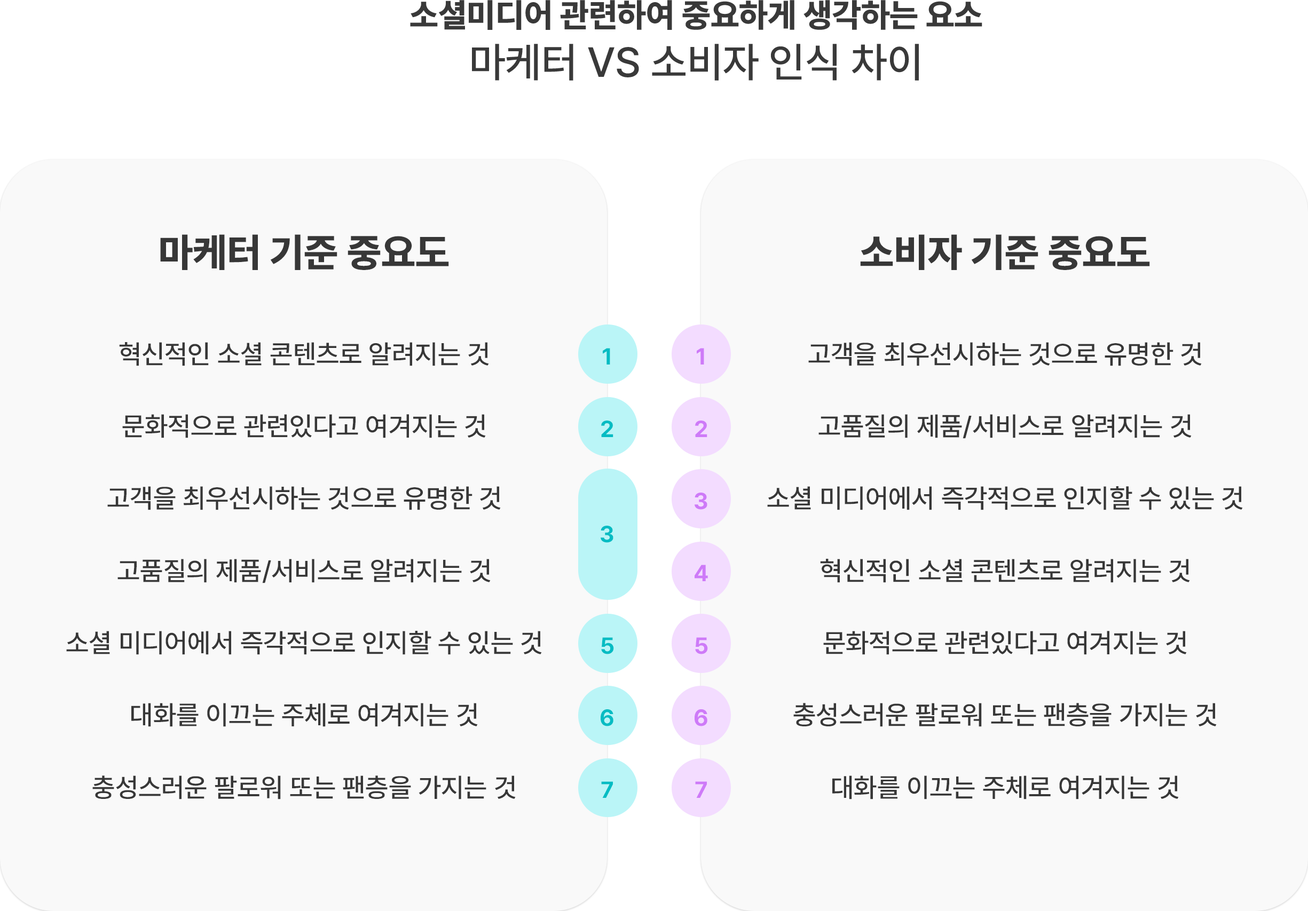
<style>
.page{position:relative;width:1308px;height:911px;background:#f9f9f9}
.page>*{position:absolute;margin:0}
.t1{font:33.1px "Pretendard-ExtraBold";color:#393939;text-transform:uppercase}
.t2{font:41.6px "Pretendard-Medium";color:#393939;text-transform:uppercase}
.t3{font:39.5px "Pretendard-ExtraBold";color:#373737;text-transform:uppercase}
.t4{font:26.7px/72.3px "Pretendard-Medium";color:#373737;text-transform:uppercase}
.t5{font:23.1px "Pretendard-Bold";color:#04bcc3}
.t6{font:23.1px "Pretendard-Bold";color:#ce7af8}
</style>
<div class="page">
<p class="t1" style="left:410px;top:0px;width:573px;height:81px;text-align:center">소셜미디어 관련하여 중요하게 생각하는 요소<br><span class="t2">마케터 VS 소비자 인식 차이</span></p>
<p class="t3" style="left:160px;top:234px;width:289px;height:36px">마케터 기준 중요도</p>
<p class="t3" style="left:860px;top:234px;width:290px;height:36px">소비자 기준 중요도</p>
<p class="t4" style="left:66px;top:342px;width:476px;height:458px;text-align:center">혁신적인 소셜 콘텐츠로 알려지는 것<br>문화적으로 관련있다고 여겨지는 것<br>고객을 최우선시하는 것으로 유명한 것<br>고품질의 제품/서비스로 알려지는 것<br>소셜 미디어에서 즉각적으로 인지할 수 있는 것<br>대화를 이끄는 주체로 여겨지는 것<br>충성스러운 팔로워 또는 팬층을 가지는 것</p>
<p class="t5" style="left:603px;top:348px;width:7px;height:17px">1</p>
<p class="t6" style="left:697px;top:348px;width:7px;height:17px">1</p>
<p class="t4" style="left:767px;top:342px;width:476px;height:458px;text-align:center">고객을 최우선시하는 것으로 유명한 것<br>고품질의 제품/서비스로 알려지는 것<br>소셜 미디어에서 즉각적으로 인지할 수 있는 것<br>혁신적인 소셜 콘텐츠로 알려지는 것<br>문화적으로 관련있다고 여겨지는 것<br>충성스러운 팔로워 또는 팬층을 가지는 것<br>대화를 이끄는 주체로 여겨지는 것</p>
<p class="t5" style="left:601px;top:421px;width:13px;height:16px">2</p>
<p class="t6" style="left:695px;top:421px;width:13px;height:16px">2</p>
<p class="t6" style="left:695px;top:493px;width:13px;height:17px">3</p>
<p class="t5" style="left:601px;top:526px;width:13px;height:17px">3</p>
<p class="t6" style="left:695px;top:565px;width:13px;height:16px">4</p>
<p class="t5" style="left:601px;top:638px;width:13px;height:17px">5</p>
<p class="t6" style="left:695px;top:638px;width:13px;height:17px">5</p>
<p class="t5" style="left:601px;top:710px;width:13px;height:17px">6</p>
<p class="t6" style="left:695px;top:710px;width:13px;height:17px">6</p>
<p class="t5" style="left:601px;top:782px;width:12px;height:16px">7</p>
<p class="t6" style="left:695px;top:782px;width:12px;height:16px">7</p>
</div>
